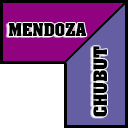
<style>
.page{position:relative;width:128px;height:128px;background:#ffffff}
.page>*{position:absolute;margin:0}
.t1{font:14.7px "AardvarkBold";color:#000000}
.t2{font:16px "AardvarkBold";color:#000000}
</style>
<div class="page">
<p class="t1" style="left:8px;top:23px;width:79px;height:13px">MENDOZA</p>
<p class="t2" style="left:93px;top:46px;width:15px;height:71px;rotate:-90deg">CHUBUT</p>
</div>
